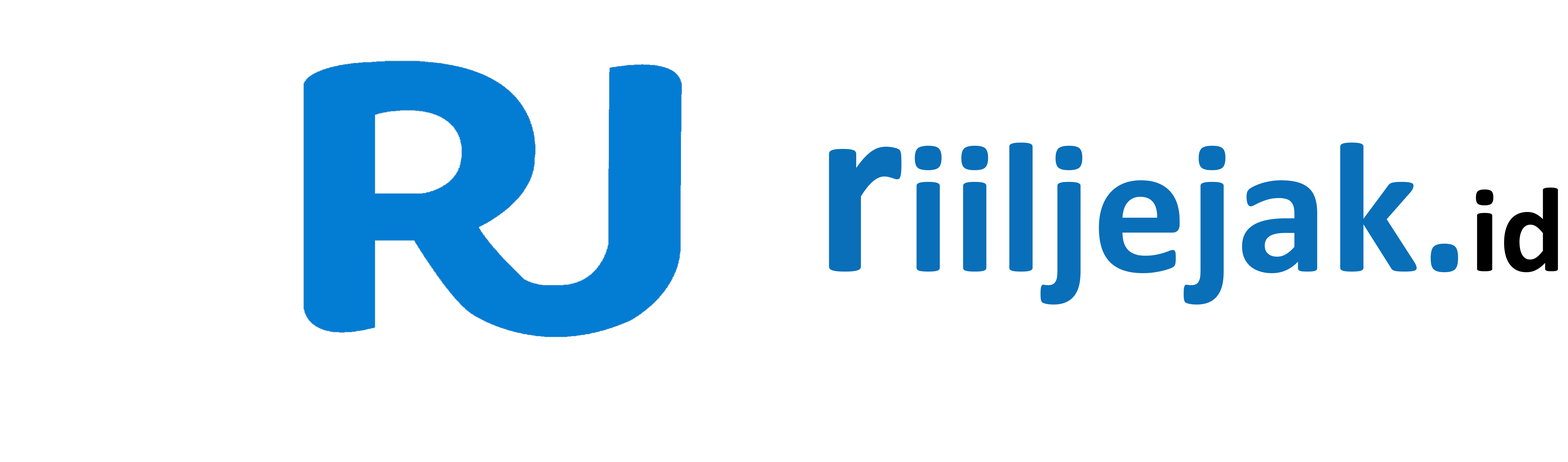
<style>
.page{position:relative;width:1568px;height:462px;background:#ffffff}
.page>*{position:absolute;margin:0}
.t1{font:188.7px "Calibri-Bold";color:#096fb9}
.t2{font:258.6px "Calibri-Bold";color:#096fb9}
.t3{font:122.7px "Calibri-Bold";color:#000000}
</style>
<div class="page">
<p class="t1" style="left:829px;top:142px;width:729px;height:162px"><span class="t2">r</span>iiljejak.<span class="t3">id</span></p>
</div>
